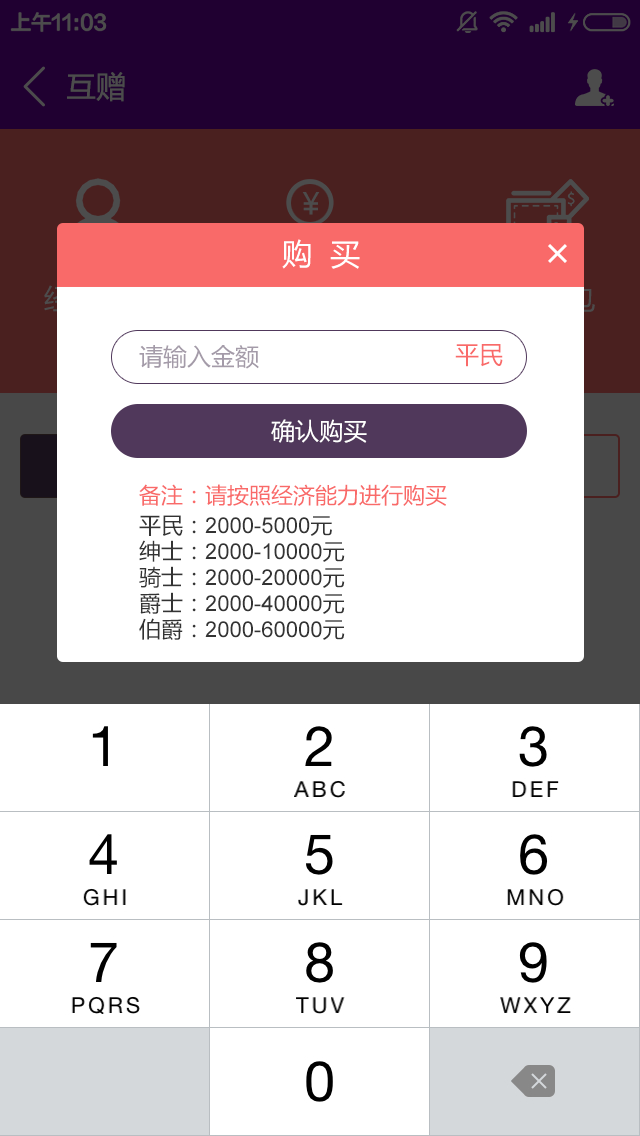
<style>
.page{position:relative;width:640px;height:1136px;background:#ffffff}
.page>*{position:absolute;margin:0}
.t1{font:30px "MicrosoftYaHei";color:#4c4c4c}
.t2{font:29.7px "MicrosoftYaHei";color:#4c4c4c}
.t3{font:30px "MicrosoftYaHei";color:#ffffff}
.t4{font:24px "MicrosoftYaHei";color:#a49ba9}
.t5{font:24px "MicrosoftYaHei";color:#f96a69}
.t6{font:24px "MicrosoftYaHei";color:#ffffff}
.t7{font:22px/30px "MicrosoftYaHei";color:#f96a69}
.t8{font:22px/26px "MicrosoftYaHei";color:#333333}
.t9{font:22px/26px "ArialMT";color:#333333}
</style>
<div class="page">
<p class="t1" style="left:67px;top:72px;width:58px;height:30px">互赠</p>
<p class="t2" style="left:302px;top:192px;width:18px;height:23px">￥</p>
<p class="t3" style="left:282px;top:239px;width:78px;height:30px">购  买</p>
<p class="t4" style="left:139px;top:345px;width:120px;height:24px">请输入金额</p>
<p class="t5" style="left:455px;top:344px;width:48px;height:23px">平民</p>
<p class="t6" style="left:271px;top:419px;width:96px;height:24px">确认购买</p>
<p class="t7" style="left:139px;top:484px;width:308px;height:156px">备注：请按照经济能力进行购买<br><span class="t8">平民：</span><span class="t9">2000-5000</span><span class="t8">元<br>绅士：</span><span class="t9">2000-10000</span><span class="t8">元<br>骑士：</span><span class="t9">2000-20000</span><span class="t8">元<br>爵士：</span><span class="t9">2000-40000</span><span class="t8">元<br>伯爵：</span><span class="t9">2000-60000</span><span class="t8">元</span></p>
</div>
